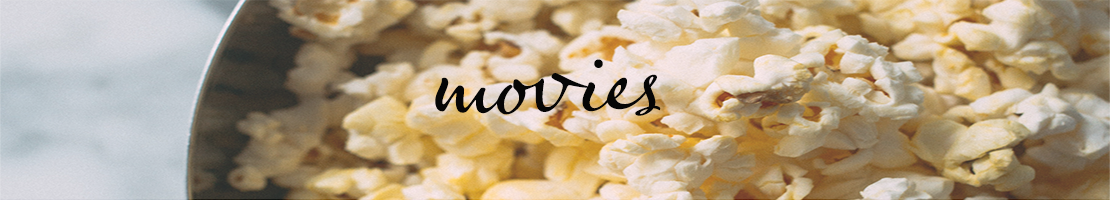
<style>
.page{position:relative;width:1110px;height:200px}
.page>*{position:absolute;margin:0}
.t1{font:120px "Olicana-Smooth";color:#060606}
</style>
<div class="page">
<p class="t1" style="left:435px;top:59px;width:226px;height:57px">movies</p>
</div>
